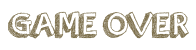
<style>
.page{position:relative;width:196px;height:50px;background:#ffffff}
.page>*{position:absolute;margin:0}
.t1{font:36px "orangejuice";color:#7f724f}
</style>
<div class="page">
<p class="t1" style="left:8px;top:11px;width:181px;height:28px">GAME OVER</p>
</div>
